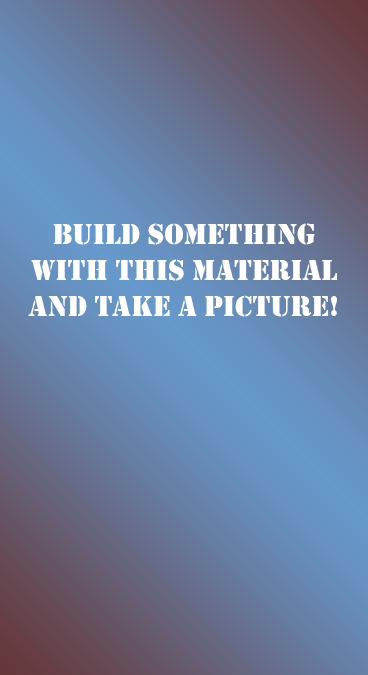
<style>
.page{position:relative;width:368px;height:675px}
.page>*{position:absolute;margin:0}
.t1{font:30px "Stencil";color:#ffffff}
</style>
<div class="page">
<p class="t1" style="left:28px;top:223px;width:309px;height:94px;text-align:center">Build something<br>with this material<br>and take a picture!</p>
</div>
